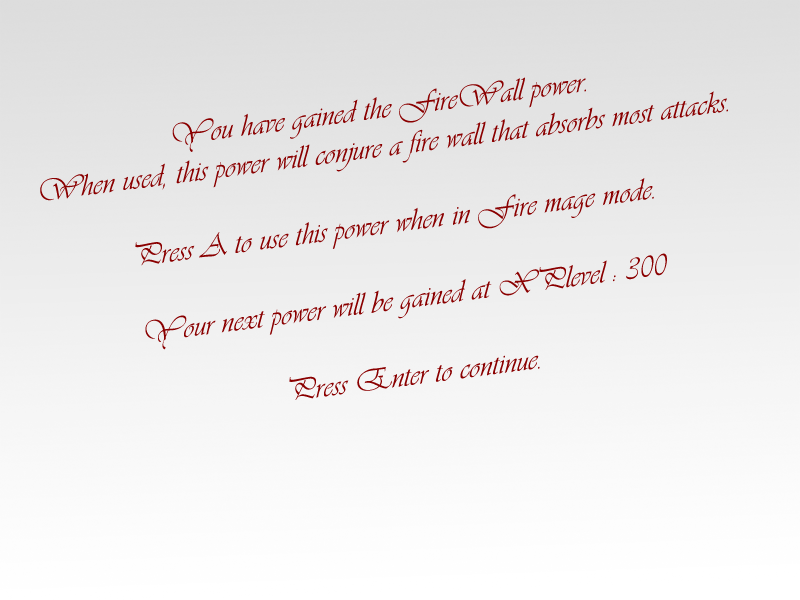
<style>
.page{position:relative;width:800px;height:600px}
.page>*{position:absolute;margin:0}
.t1{font:32px "Vivaldii";color:#8a0000}
</style>
<div class="page">
<p class="t1" style="left:40px;top:77px;width:688px;height:323px;text-align:center;rotate:-7deg">You have gained the FireWall power.<br>When used, this power will conjure a fire wall that absorbs most attacks.<br><br>Press A to use this power when in Fire mage mode.<br><br>Your next power will be gained at XPlevel : 300<br><br>Press Enter to continue.</p>
</div>
